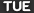
<style>
.page{position:relative;width:34px;height:13px}
.page>*{position:absolute;margin:0}
.t1{font:13.9px "K2D-ExtraBold";color:#ffffff}
</style>
<div class="page">
<p class="t1" style="left:3px;top:1px;width:28px;height:11px">TUE</p>
</div>
